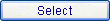
<style>
.page{position:relative;width:110px;height:21px;background:#f4f5ef}
.page>*{position:absolute;margin:0}
.t1{font:12px "ArialMT";letter-spacing:0.01em;color:#0d007e}
</style>
<div class="page">
<p class="t1" style="left:38px;top:6px;width:34px;height:9px">Select</p>
</div>
